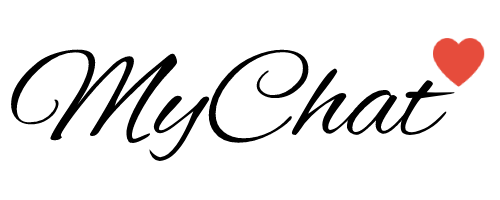
<style>
.page{position:relative;width:500px;height:200px;background:#ffffff}
.page>*{position:absolute;margin:0}
.t1{font:130px "AlexBrush-Regular";color:#000000}
</style>
<div class="page">
<p class="t1" style="left:11px;top:49px;width:444px;height:112px">MyChat</p>
</div>
